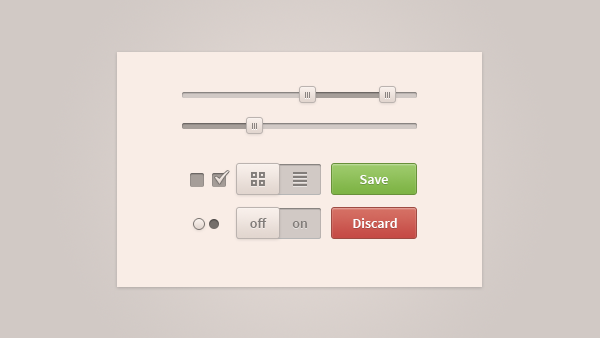
<style>
.page{position:relative;width:600px;height:338px;background:#f9ede6}
.page>*{position:absolute;margin:0}
.t1{font:14px "SourceSansPro-Semibold";color:#ffffff}
.t2{font:14px "SourceSansPro-Semibold";color:#827d7a}
</style>
<div class="page">
<p class="t1" style="left:360px;top:175px;width:28px;height:9px">Save</p>
<p class="t2" style="left:250px;top:218px;width:17px;height:10px">off</p>
<p class="t2" style="left:292px;top:221px;width:15px;height:7px">on</p>
<p class="t1" style="left:353px;top:218px;width:44px;height:10px">Discard</p>
</div>
